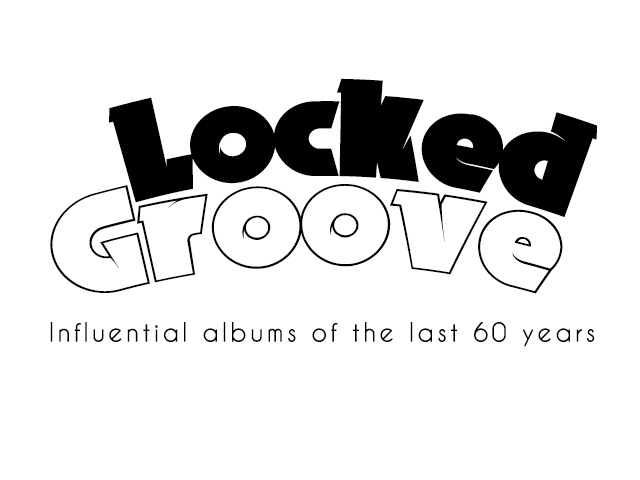
<style>
.page{position:relative;width:640px;height:480px;background:#ffffff}
.page>*{position:absolute;margin:0}
.t1{font:138.7px "BrokenRecords45";letter-spacing:-0.025em;color:#000000}
.t2{font:144px "BrokenRecords33";letter-spacing:-0.025em;color:#000000}
.t3{font:26.7px "CaviarDreams-Bold";letter-spacing:0.1em;color:#000000}
</style>
<div class="page">
<p class="t1" style="left:109px;top:78px;width:489px;height:140px;rotate:2deg">Locked</p>
<p class="t2" style="left:50px;top:184px;width:513px;height:110px;rotate:-1deg">Groove</p>
<p class="t3" style="left:50px;top:322px;width:545px;height:25px">Influential albums of the last 60 years</p>
</div>
